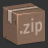
<style>
.page{position:relative;width:48px;height:48px;background:#333333}
.page>*{position:absolute;margin:0}
.t1{font:17.7px "LucidaGrande-Bold";color:#b8a495;scale:0.72 1}
</style>
<div class="page">
<p class="t1" style="left:20px;top:18px;width:23px;height:18px;rotate:-9deg">.zip</p>
</div>
